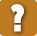
<style>
.page{position:relative;width:37px;height:36px;background:#bd7b22}
.page>*{position:absolute;margin:0}
.t1{font:37.2px "Kabel-Black";color:#ffffff}
</style>
<div class="page">
<p class="t1" style="left:11px;top:4px;width:13px;height:28px">?</p>
</div>
